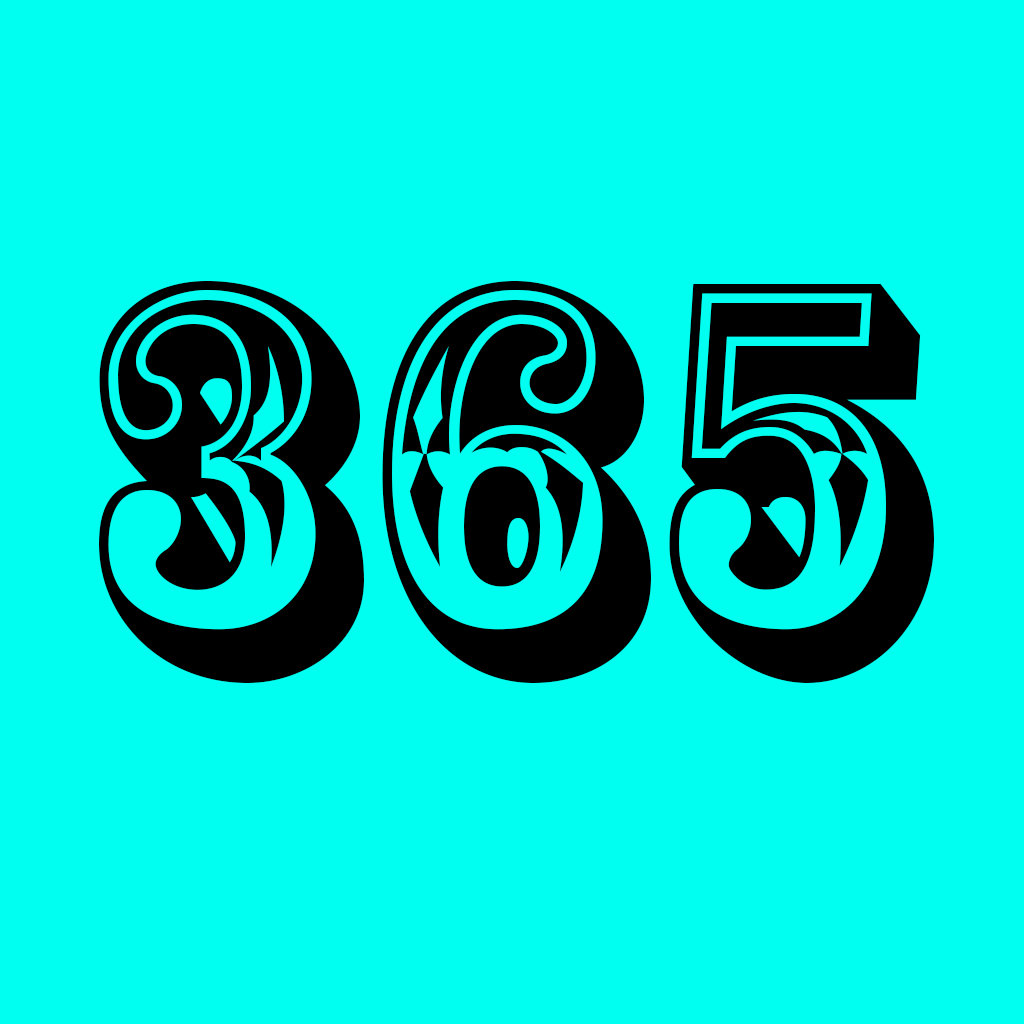
<style>
.page{position:relative;width:1024px;height:1024px;background:#00fff0}
.page>*{position:absolute;margin:0}
.t1{font:527.1px "RosewoodStd-Regular";color:#000000}
</style>
<div class="page">
<p class="t1" style="left:99px;top:281px;width:835px;height:402px">365</p>
</div>
